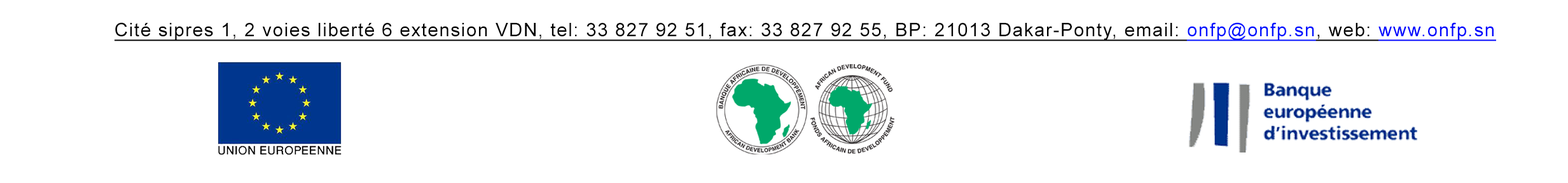
<style>
.page{position:relative;width:1568px;height:183px;background:#ffffff}
.page>*{position:absolute;margin:0}
.t1{font:18.6px "ArialMT";letter-spacing:0.06em;color:#000000;text-decoration:underline}
.t2{font:18.6px "ArialMT";letter-spacing:0.06em;color:#0012ff;text-decoration:underline}
.t3{font:18.6px "ArialMT";letter-spacing:0.06em;color:#0006fe;text-decoration:underline}
</style>
<div class="page">
<p class="t1" style="left:114px;top:22px;width:1382px;height:19px">Cité sipres 1, 2 voies liberté 6 extension VDN, tel: 33 827 92 51, fax: 33 827 92 55, BP: 21013 Dakar-Ponty, email: <span class="t2">onfp@onfp.sn</span>, web: <span class="t3">www.onfp.sn</span></p>
</div>
